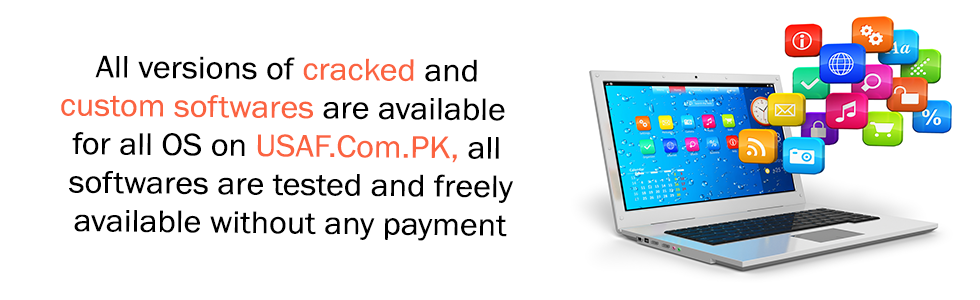
<style>
.page{position:relative;width:980px;height:300px;background:#ffffff}
.page>*{position:absolute;margin:0}
.t1{font:32.1px "FranklinGothic-Book";color:#000000;scale:1.06 1}
.t2{font:32.1px "FranklinGothic-Book";color:#fb6340;scale:1.06 1}
</style>
<div class="page">
<p class="t1" style="left:61px;top:55px;width:452px;height:186px;text-align:center;rotate:1deg">All versions of <span class="t2">cracked</span> and<br><span class="t2"> custom softwares</span> are available<br> for all OS on <span class="t2">USAF.Com.PK,</span> all <br>softwares are tested and freely <br>available without any payment</p>
</div>
